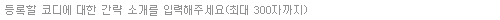
<style>
.page{position:relative;width:500px;height:20px;background:#ffffff}
.page>*{position:absolute;margin:0}
.t1{font:12px "morris9";color:#929292;scale:0.96 1}
</style>
<div class="page">
<p class="t1" style="left:5px;top:5px;width:302px;height:11px">등록할 코디에 대한 간략 소개를 입력해주세요(최대 300자까지)</p>
</div>
